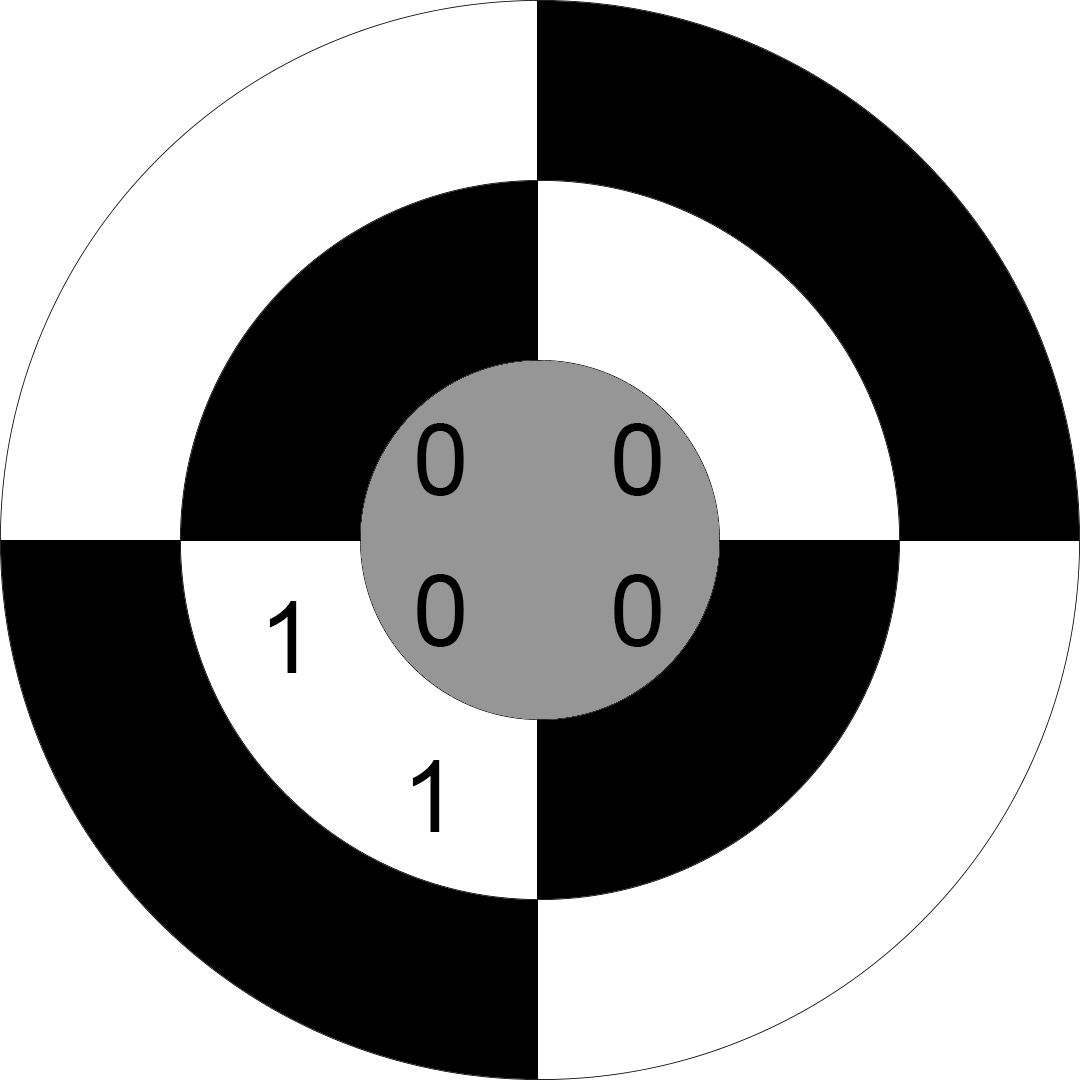
<style>
.page{position:relative;width:1080px;height:1080px;background:#ffffff}
.page>*{position:absolute;margin:0}
.t1{font:100px "ArialMT";color:#000000}
</style>
<div class="page">
<p class="t1" style="left:417px;top:423px;width:47px;height:73px">0</p>
<p class="t1" style="left:614px;top:423px;width:47px;height:73px">0</p>
<p class="t1" style="left:417px;top:574px;width:47px;height:73px">0</p>
<p class="t1" style="left:614px;top:574px;width:47px;height:73px">0</p>
<p class="t1" style="left:269px;top:601px;width:28px;height:72px">1</p>
<p class="t1" style="left:412px;top:760px;width:28px;height:72px">1</p>
</div>
